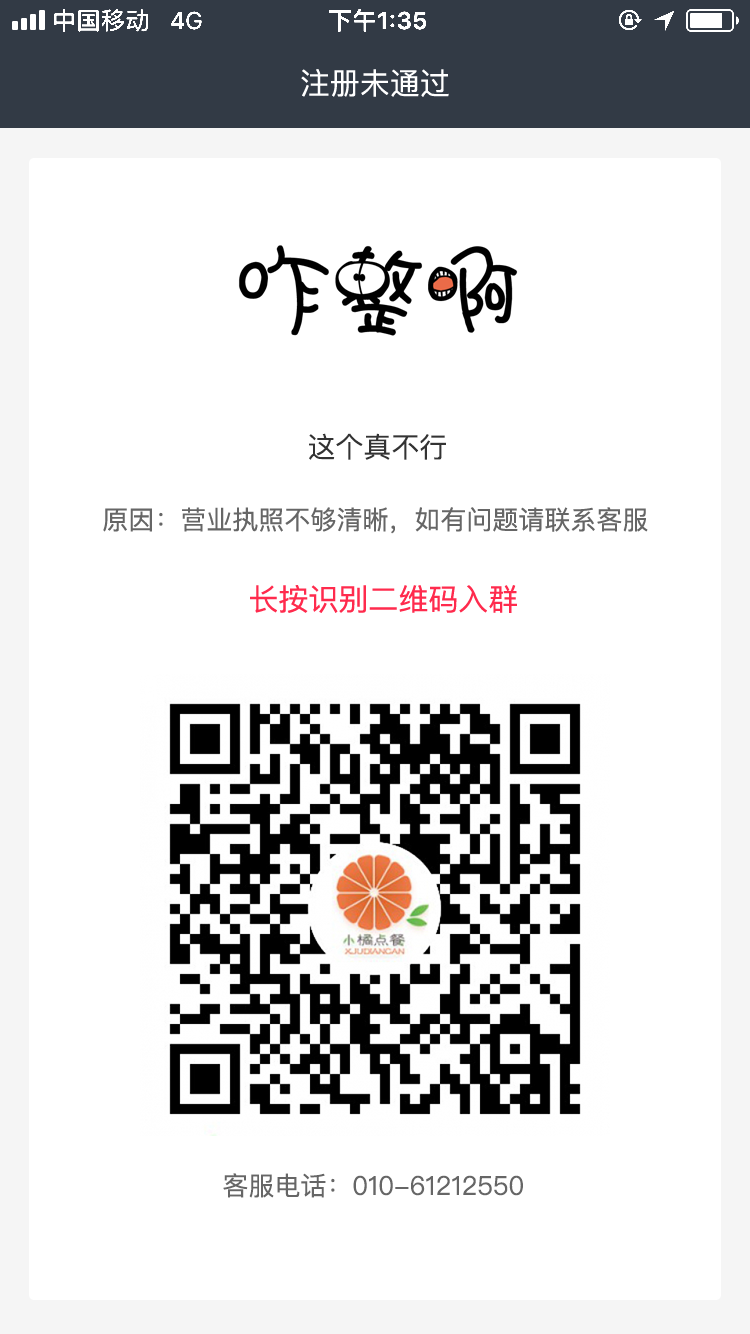
<style>
.page{position:relative;width:750px;height:1334px;background:#ffffff}
.page>*{position:absolute;margin:0}
.t1{font:30px "PingFang-SC-Medium";color:#ffffff}
.t2{font:28px "PingFangSC-Regular";color:#333333}
.t3{font:26px "PingFang-SC-Medium";color:#666666}
.t4{font:30px "PingFang-SC-Medium";color:#ff2b4d}
.t5{font:26px "PingFangSC-Regular";color:#666666}
</style>
<div class="page">
<p class="t1" style="left:301px;top:69px;width:148px;height:28px">注册未通过</p>
<p class="t2" style="left:309px;top:433px;width:137px;height:27px">这个真不行</p>
<p class="t3" style="left:103px;top:507px;width:545px;height:27px">原因：营业执照不够清晰，如有问题请联系客服</p>
<p class="t4" style="left:250px;top:585px;width:267px;height:28px">长按识别二维码入群</p>
<p class="t5" style="left:223px;top:1173px;width:300px;height:25px">客服电话：010-61212550</p>
</div>
